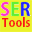
<style>
.page{position:relative;width:32px;height:32px;background:#ebf12a}
.page>*{position:absolute;margin:0}
.t1{font:17.9px "KozGoPr6N-Bold"}
.t2{font:11.5px "KozGoPr6N-Bold";color:#fb1616}
</style>
<div class="page">
<p class="t1" style="left:0px;top:2px;width:31px;height:14px">SER</p>
<p class="t1" style="left:0px;top:2px;width:31px;height:14px">SER</p>
<p class="t2" style="left:2px;top:17px;width:28px;height:10px">Tools</p>
</div>
